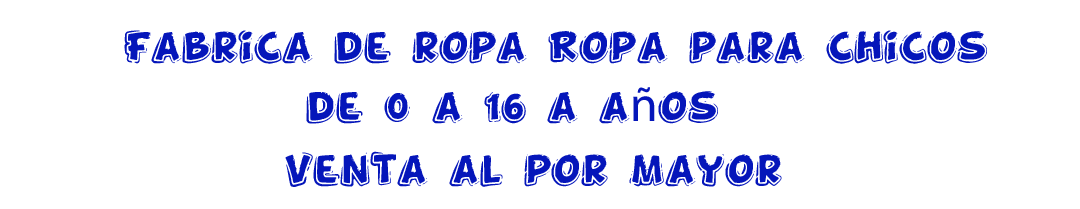
<style>
.page{position:relative;width:1080px;height:209px;background:#ffffff}
.page>*{position:absolute;margin:0}
.t1{font:50px "FunnyKid";color:#0516ba}
.t2{font:50px "MyriadPro-Regular";color:#0516ba}
</style>
<div class="page">
<p class="t1" style="left:124px;top:30px;width:863px;height:34px">Fabrica de ropa Ropa para chicos</p>
<p class="t1" style="left:306px;top:87px;width:412px;height:37px">de 0 a 16 a a<span class="t2">ñ</span>os</p>
<p class="t1" style="left:285px;top:151px;width:497px;height:36px">Venta al por mayor</p>
</div>
